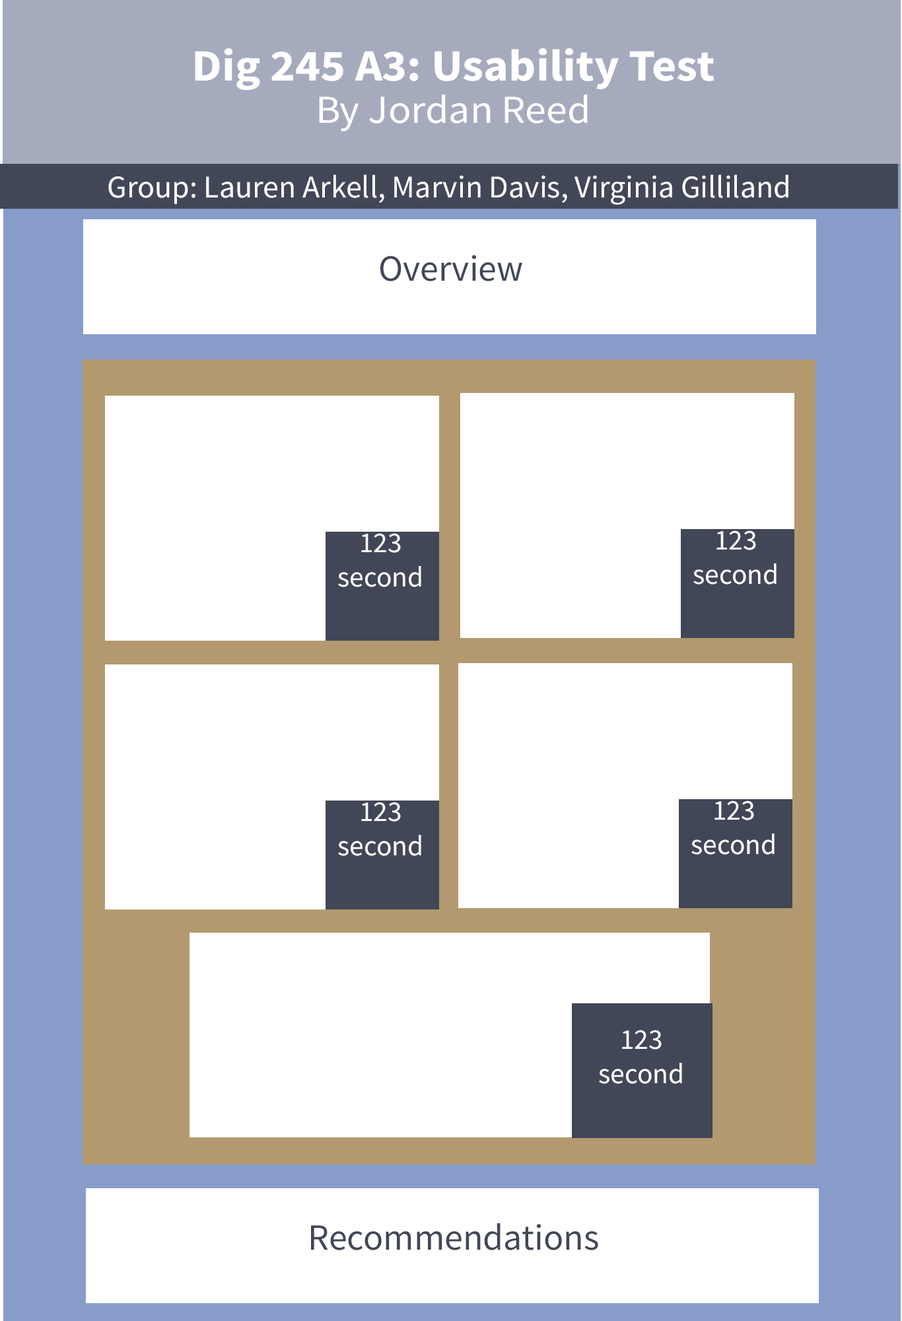
<style>
.page{position:relative;width:902px;height:1321px;background:#ffffff}
.page>*{position:absolute;margin:0}
.t1{font:44.8px "SourceSansRoman-Bold";color:#ffffff;scale:1.07 1}
.t2{font:39.6px "SourceSansRoman-Regular";color:#ffffff;scale:1.07 1}
.t3{font:31.7px "SourceSansRoman-Regular";color:#ffffff}
.t4{font:37px "SourceSansRoman-Regular";color:#414756}
.t5{font:28.7px "SourceSansRoman-Regular";color:#ffffff}
</style>
<div class="page">
<p class="t1" style="left:195px;top:48px;width:520px;height:43px;text-align:center">Dig 245 A3: Usability Test<br><br><br>by</p>
<p class="t2" style="left:319px;top:94px;width:269px;height:37px;text-align:center">By Jordan Reed<br><br><span class="t1"><br><br>by</span></p>
<p class="t3" style="left:108px;top:174px;width:681px;height:31px">Group: Lauren Arkell, Marvin Davis, Virginia Gilliland</p>
<p class="t4" style="left:381px;top:255px;width:142px;height:26px">Overview</p>
<p class="t5" style="left:338px;top:533px;width:83px;height:54px;text-align:center">123 second</p>
<p class="t5" style="left:694px;top:531px;width:83px;height:54px;text-align:center">123 second</p>
<p class="t5" style="left:338px;top:802px;width:83px;height:54px;text-align:center">123 second</p>
<p class="t5" style="left:692px;top:801px;width:83px;height:54px;text-align:center">123 second</p>
<p class="t5" style="left:599px;top:1030px;width:83px;height:54px;text-align:center">123 second</p>
<p class="t4" style="left:311px;top:1224px;width:288px;height:27px">Recommendations</p>
</div>
